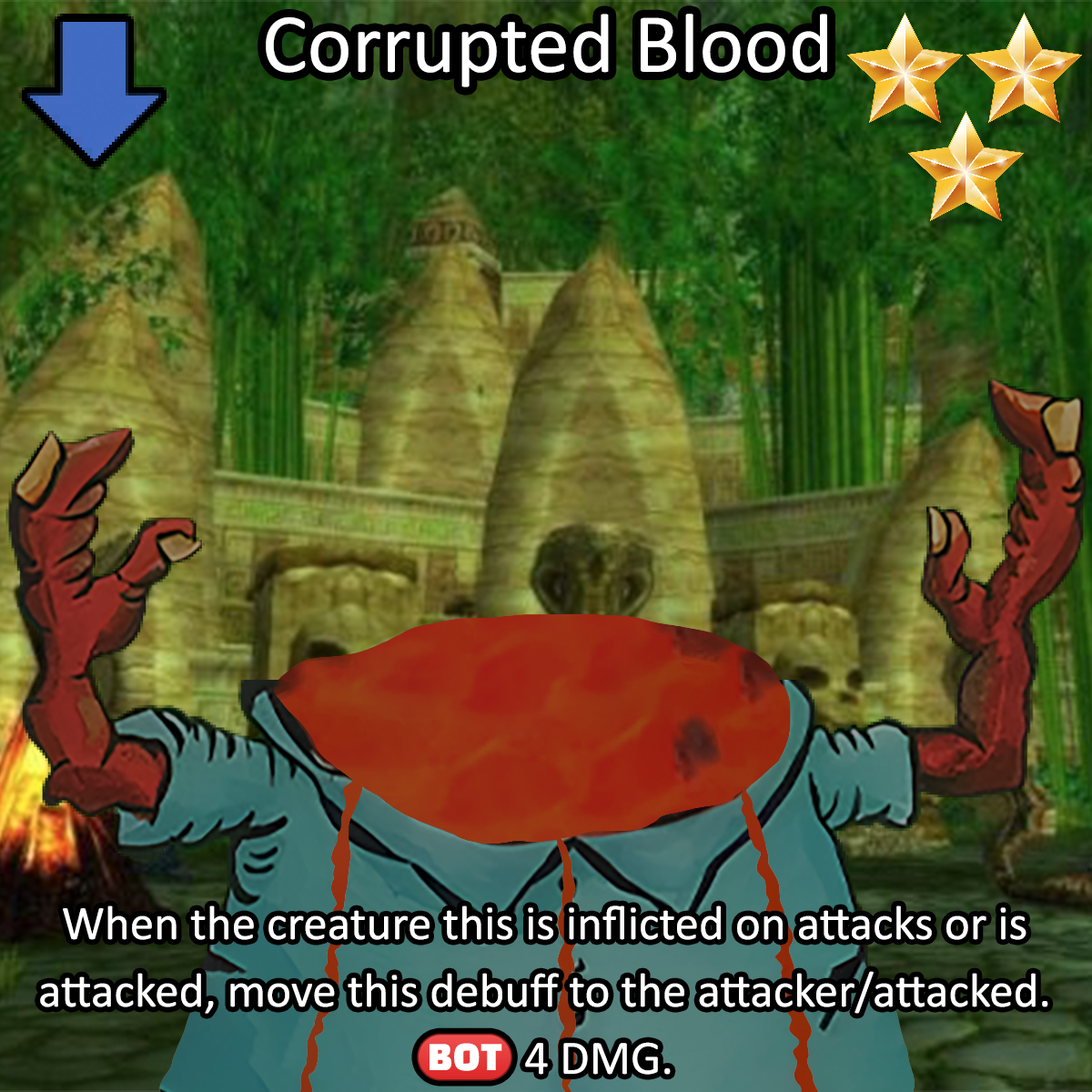
<style>
.page{position:relative;width:1092px;height:1092px}
.page>*{position:absolute;margin:0}
.t1{font:145.6px "Calibri";color:#ffffff}
.t2{font:82.8px/67.3px "Calibri";color:#ffffff}
.t3{font:82.8px/67.3px "stoogedings-Regular";color:#ffffff}
</style>
<div class="page">
<p class="t1" style="left:266px;top:14px;width:561px;height:73px">Corrupted Blood</p>
<p class="t2" style="left:40px;top:905px;width:1008px;height:176px;text-align:center">When the creature this is inflicted on attacks or is attacked, move this debuff to the attacker/attacked.<br><span class="t3">(BOT)</span> 4 DMG.</p>
</div>
